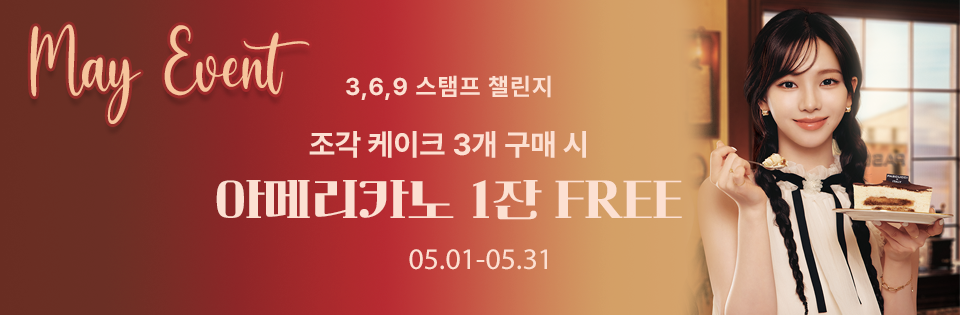
<style>
.page{position:relative;width:960px;height:315px}
.page>*{position:absolute;margin:0}
.t1{font:30px/30px "Pretendard-Bold";color:#fce0d2}
.t2{font:24px/30px "Pretendard-Bold";letter-spacing:0.05em;color:#fce0d2}
.t3{font:48px/60px "Cafe24ClassicType-Regular";color:#fce0d2}
.t4{font:30px "MyriadPro-Regular";color:#fce0d2}
</style>
<div class="page">
<p class="t1" style="left:216px;top:75px;width:466px;height:145px;text-align:center"><span class="t2">3,6,9 스탬프 챌린지<br><br></span>조각 케이크 3개 구매 시<br><span class="t3">아메리카노 1잔 FREE</span></p>
<p class="t4" style="left:409px;top:249px;width:138px;height:21px">05.01-05.31</p>
</div>
